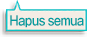
<style>
.page{position:relative;width:87px;height:37px;background:#ffffff}
.page>*{position:absolute;margin:0}
.t1{font:13px "GothicMB101Pro-DeBold";letter-spacing:-0.04em;color:#009c9f;scale:0.8 1}
</style>
<div class="page">
<p class="t1" style="left:10px;top:15px;width:74px;height:13px">Hapus semua</p>
</div>
